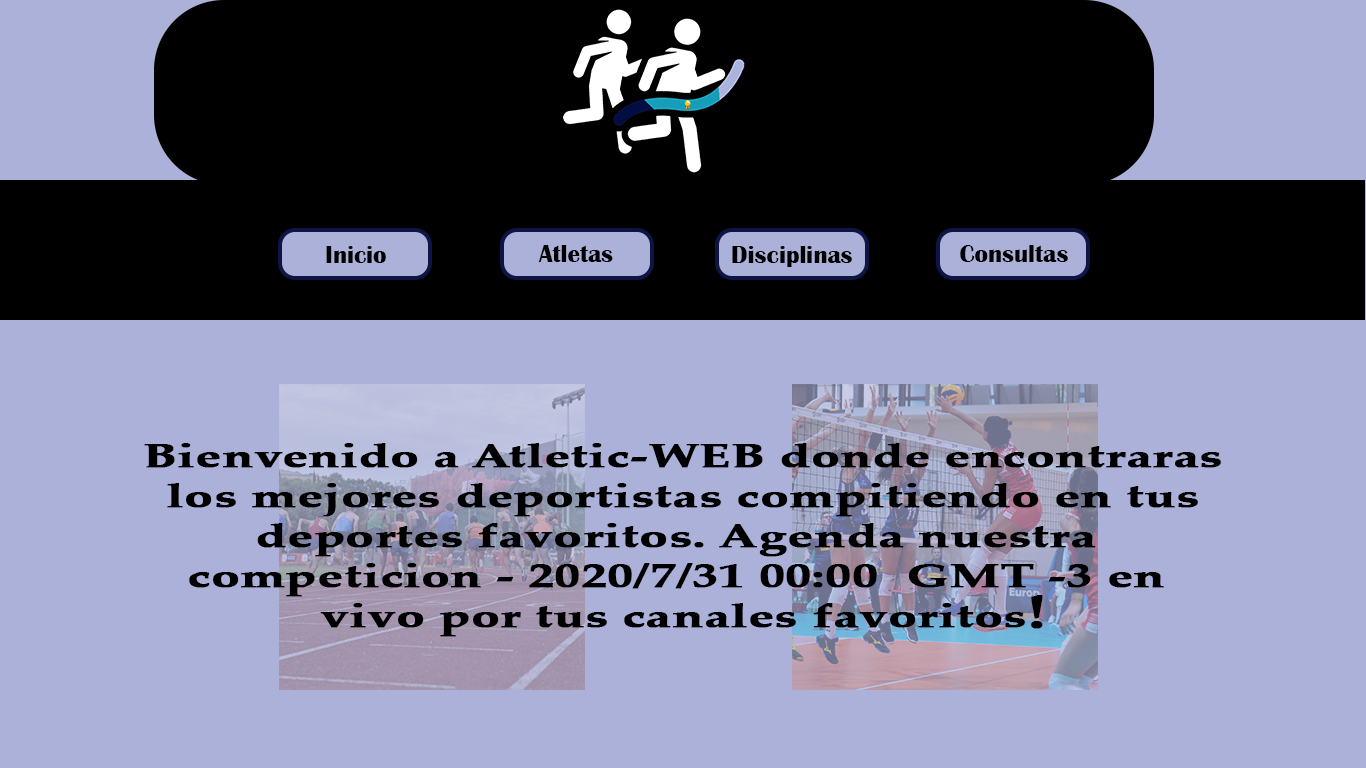
<style>
.page{position:relative;width:1366px;height:768px;background:#abb1d9}
.page>*{position:absolute;margin:0}
.t1{font:25px "BritannicBold";color:#000000}
.t2{font:33.3px "PalatinoLinotype-Bold";color:#000000;font-weight:bold;scale:1.5 1}
.t3{font:46.7px "PalatinoLinotype-Bold";color:#000000;font-weight:bold;scale:1.36 1}
</style>
<div class="page">
<p class="t1" style="left:326px;top:246px;width:60px;height:17px">Inicio</p>
<p class="t1" style="left:538px;top:244px;width:75px;height:18px">Atletas</p>
<p class="t1" style="left:732px;top:245px;width:120px;height:22px">Disciplinas</p>
<p class="t1" style="left:960px;top:244px;width:108px;height:18px">Consultas</p>
<p class="t2" style="left:144px;top:443px;width:1077px;height:194px;text-align:center">Bienvenido a Atletic-WEB donde encontraras<br>los mejores deportistas compitiendo en tus<br>deportes favoritos. Agenda nuestra <br>competicion - 2020/7/31 00:00  GMT -3 en <br>vivo por tus canales favoritos<span class="t3">!</span></p>
</div>
